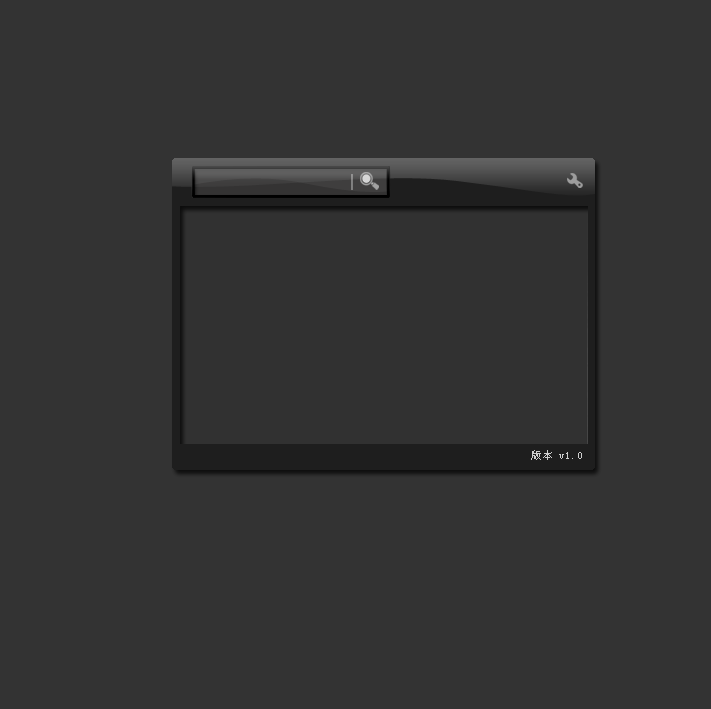
<style>
.page{position:relative;width:711px;height:709px;background:#333333}
.page>*{position:absolute;margin:0}
.t1{font:11px "SimSun";color:#cecece}
</style>
<div class="page">
<p class="t1" style="left:531px;top:450px;width:51px;height:10px">版本 v1.0</p>
</div>
